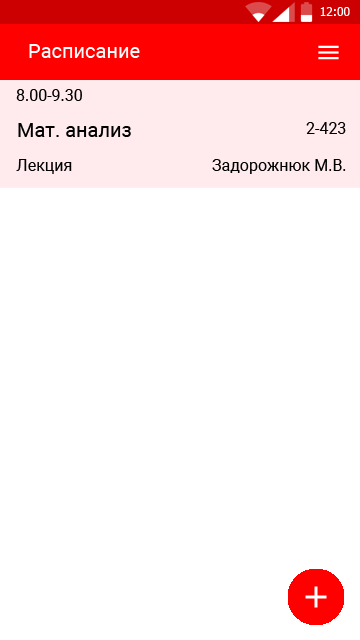
<style>
.page{position:relative;width:360px;height:640px;background:#ffffff}
.page>*{position:absolute;margin:0}
.t1{font:12px "Tahoma";color:#ffffff}
.t2{font:20px "Roboto-Regular";color:#ffffff}
.t3{font:16px "Roboto-Regular";color:#000000}
.t4{font:20px "Roboto-Regular";color:#000000}
</style>
<div class="page">
<p class="t1" style="left:320px;top:7px;width:30px;height:9px">12:00</p>
<p class="t2" style="left:29px;top:44px;width:111px;height:14px">Расписание</p>
<p class="t3" style="left:16px;top:89px;width:66px;height:12px">8.00-9.30</p>
<p class="t4" style="left:18px;top:123px;width:113px;height:14px">Мат. анализ</p>
<p class="t3" style="left:306px;top:122px;width:40px;height:12px">2-423</p>
<p class="t3" style="left:16px;top:159px;width:56px;height:15px">Лекция</p>
<p class="t3" style="left:212px;top:159px;width:134px;height:15px">Задорожнюк М.В.</p>
</div>
